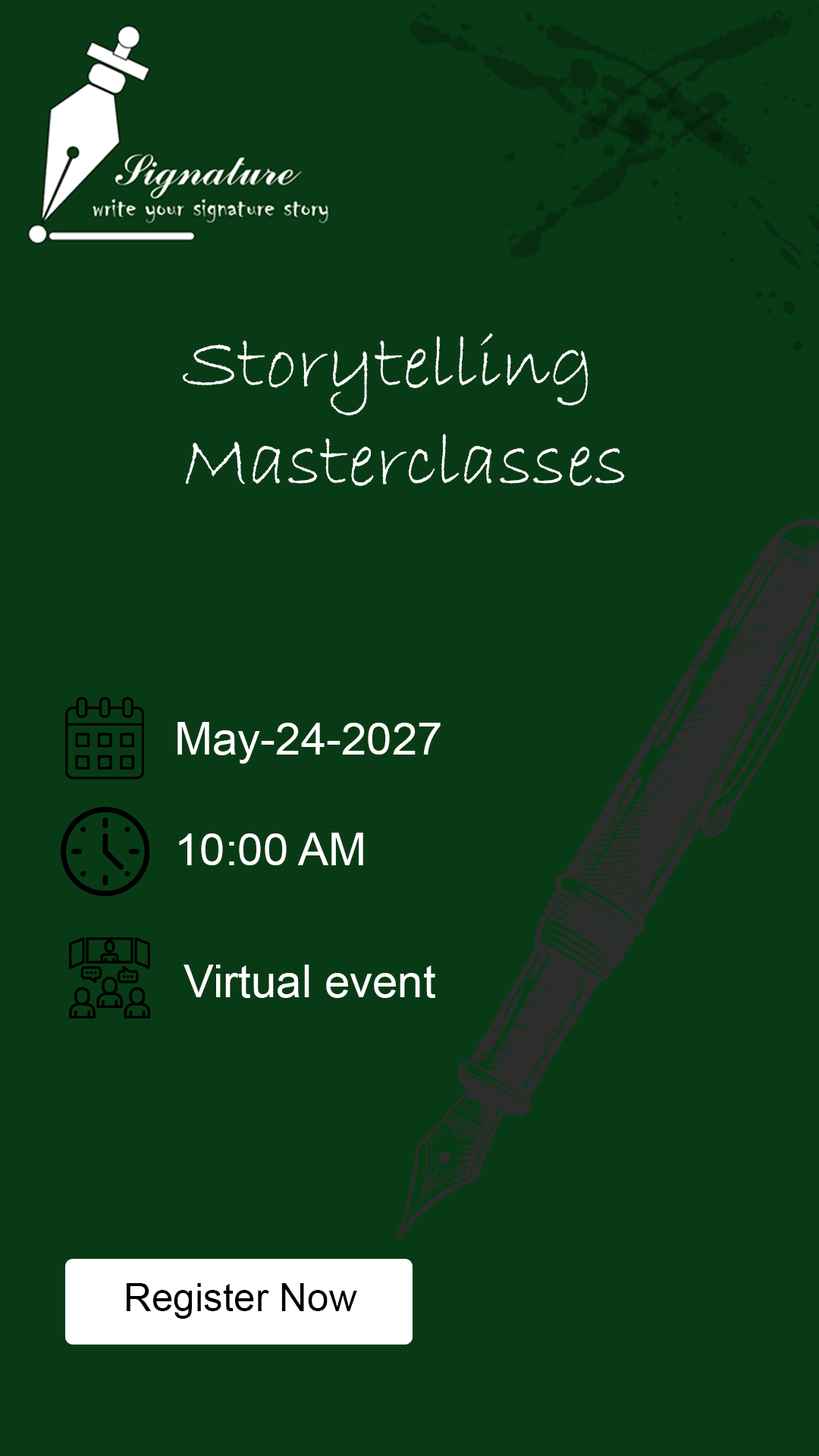
<style>
.page{position:relative;width:819px;height:1456px;background:#083b15}
.page>*{position:absolute;margin:0}
.t1{font:77.6px "BradleyHandITC";color:#ffffff}
.t2{font:45.5px "ArialMT";color:#ffffff}
.t3{font:38.9px "ArialMT";color:#000000}
</style>
<div class="page">
<p class="t1" style="left:183px;top:333px;width:405px;height:83px">Storytelling</p>
<p class="t1" style="left:186px;top:434px;width:439px;height:52px">Masterclasses</p>
<p class="t2" style="left:177px;top:722px;width:264px;height:42px">May-24-2027</p>
<p class="t2" style="left:179px;top:833px;width:184px;height:32px">10:00 AM</p>
<p class="t2" style="left:184px;top:965px;width:252px;height:33px">Virtual event</p>
<p class="t3" style="left:127px;top:1283px;width:230px;height:36px">Register Now</p>
</div>
